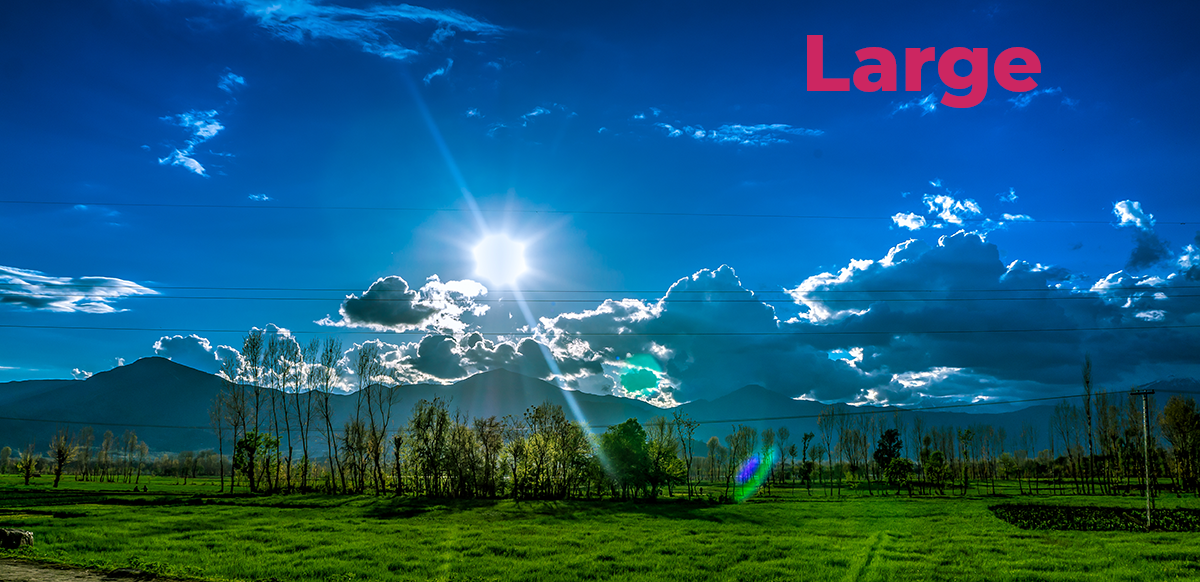
<style>
.page{position:relative;width:1200px;height:582px}
.page>*{position:absolute;margin:0}
.t1{font:80.1px "Montserrat-ExtraBold";color:#cc2661}
</style>
<div class="page">
<p class="t1" style="left:807px;top:35px;width:234px;height:73px">Large</p>
</div>
